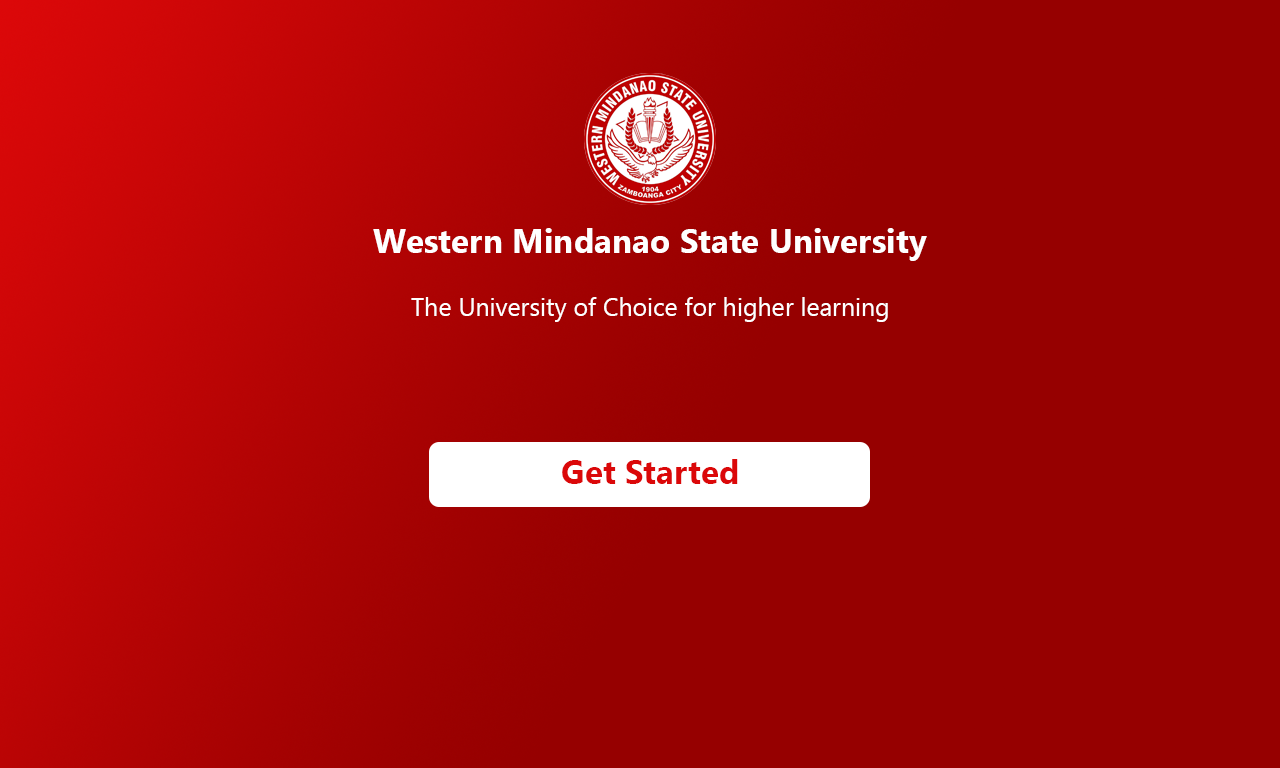
<style>
.page{position:relative;width:1280px;height:768px;background:#960000}
.page>*{position:absolute;margin:0}
.t1{font:33.3px "SegoeUI-Bold";color:#ffffff}
.t2{font:25px "SegoeUI";color:#ffffff}
.t3{font:33.3px "SegoeUI-Bold";color:#db0809}
</style>
<div class="page">
<p class="t1" style="left:373px;top:228px;width:554px;height:33px">Western Mindanao State University</p>
<p class="t2" style="left:411px;top:297px;width:477px;height:25px">The University of Choice for higher learning</p>
<p class="t3" style="left:562px;top:459px;width:176px;height:25px">Get Started</p>
</div>
